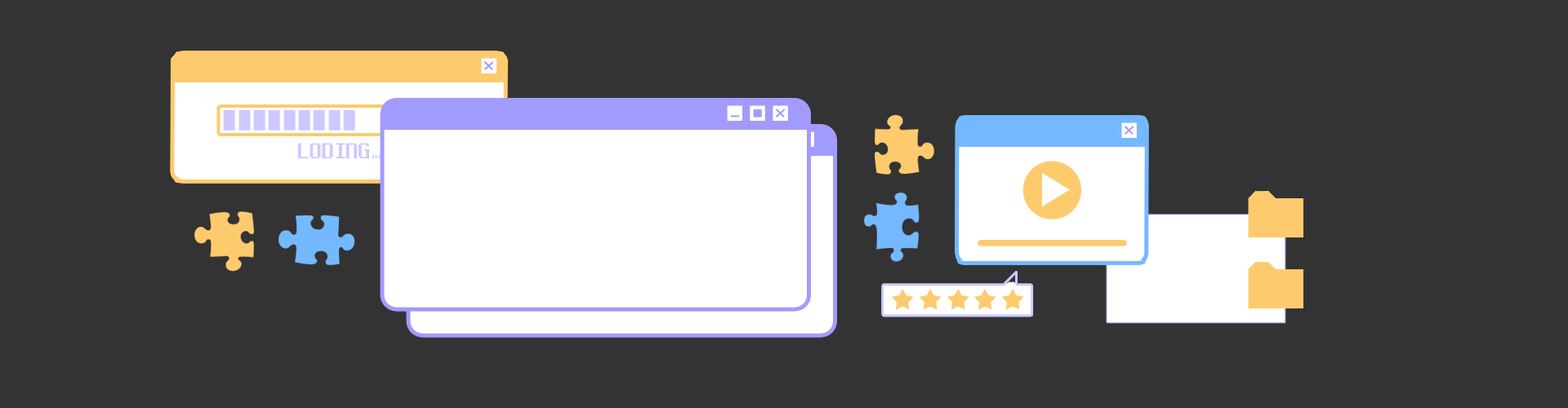
<style>
.page{position:relative;width:1568px;height:408px;background:#333333}
.page>*{position:absolute;margin:0}
.t1{font:24.2px "NeoDunggeunmo-Regular";color:#cdc9ff}
</style>
<div class="page">
<p class="t1" style="left:298px;top:143px;width:83px;height:15px">LODING…</p>
</div>
